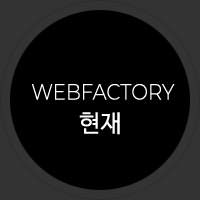
<style>
.page{position:relative;width:200px;height:200px;background:#000000}
.page>*{position:absolute;margin:0}
.t1{font:22px "Montserrat-Light";color:#ffffff;text-transform:uppercase;scale:0.9 1}
.t2{font:24px "NanumBarunGothic";color:#ffffff;text-transform:uppercase}
</style>
<div class="page">
<p class="t1" style="left:32px;top:84px;width:143px;height:16px">webfactory</p>
<p class="t2" style="left:79px;top:112px;width:41px;height:23px">현재</p>
</div>
